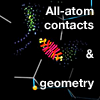
<style>
.page{position:relative;width:100px;height:100px;background:#000000}
.page>*{position:absolute;margin:0}
.t1{font:12px "HelveticaNeue-Bold";color:#ffffff}
</style>
<div class="page">
<p class="t1" style="left:40px;top:6px;width:54px;height:84px;text-align:right">All-atom<br>contacts<br><br>&amp;<br><br>geometry</p>
</div>
